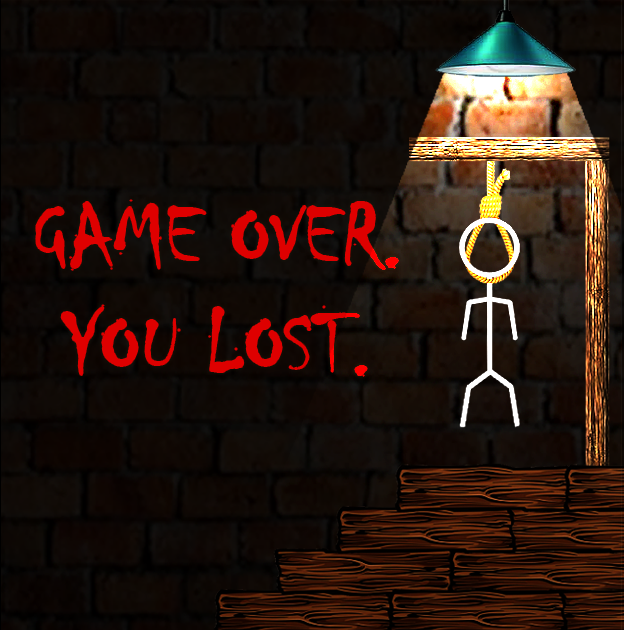
<style>
.page{position:relative;width:624px;height:630px}
.page>*{position:absolute;margin:0}
.t1{font:90.1px "Chiller-Regular";color:#de0000}
</style>
<div class="page">
<p class="t1" style="left:36px;top:200px;width:362px;height:176px;text-align:center">GAME OVER.<br>YOU LOST.</p>
</div>
